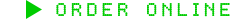
<style>
.page{position:relative;width:252px;height:19px;background:#ffffff}
.page>*{position:absolute;margin:0}
.t1{font:24px "TimesSquare";letter-spacing:0.18em;color:#00cc00}
</style>
<div class="page">
<p class="t1" style="left:56px;top:3px;width:174px;height:14px">ORDER ONLINE</p>
</div>
